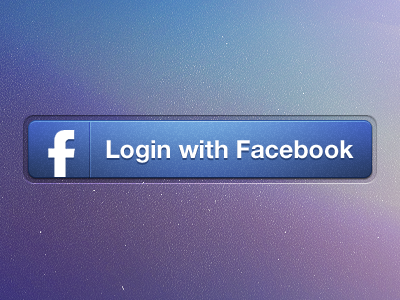
<style>
.page{position:relative;width:400px;height:300px}
.page>*{position:absolute;margin:0}
.t1{font:25px "HelveticaNeue-Bold";color:#ffffff}
</style>
<div class="page">
<p class="t1" style="left:106px;top:140px;width:248px;height:23px">Login with Facebook</p>
</div>
